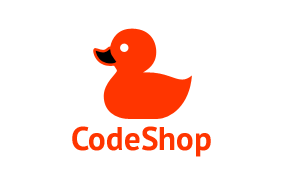
<style>
.page{position:relative;width:286px;height:180px;background:#ffffff}
.page>*{position:absolute;margin:0}
.t1{font:33px "PTSans-Bold";color:#ff3500}
</style>
<div class="page">
<p class="t1" style="left:72px;top:126px;width:139px;height:31px">CodeShop</p>
</div>
